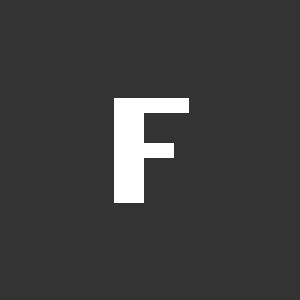
<style>
.page{position:relative;width:300px;height:300px;background:#333333}
.page>*{position:absolute;margin:0}
.t1{font:150px "Hardpixel";color:#ffffff}
</style>
<div class="page">
<p class="t1" style="left:114px;top:98px;width:75px;height:105px">F</p>
</div>
